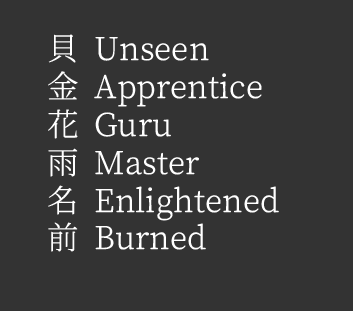
<style>
.page{position:relative;width:353px;height:311px;background:#333333}
.page>*{position:absolute;margin:0}
.t1{font:31.5px "AppliMincho";color:#ffffff}
</style>
<div class="page">
<p class="t1" style="left:48px;top:34px;width:231px;height:218px">貝 Unseen<br>金 Apprentice<br>花 Guru<br>雨 Master<br>名 Enlightened<br>前 Burned</p>
</div>
